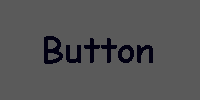
<style>
.page{position:relative;width:200px;height:100px;background:#5a5a5a}
.page>*{position:absolute;margin:0}
.t1{font:36px "ComicSansMS";color:#010012}
</style>
<div class="page">
<p class="t1" style="left:44px;top:36px;width:109px;height:28px">Button</p>
</div>
